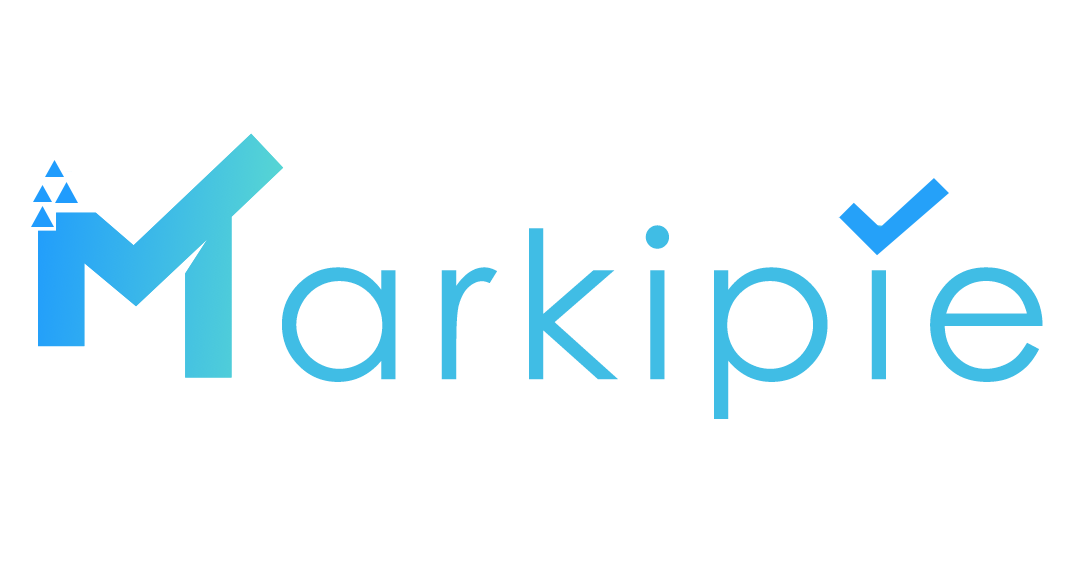
<style>
.page{position:relative;width:1080px;height:566px;background:#ffffff}
.page>*{position:absolute;margin:0}
.t1{font:204.7px "CenturyGothic";letter-spacing:0.1em;color:#40bde5}
</style>
<div class="page">
<p class="t1" style="left:282px;top:225px;width:761px;height:194px">arkipie</p>
</div>
